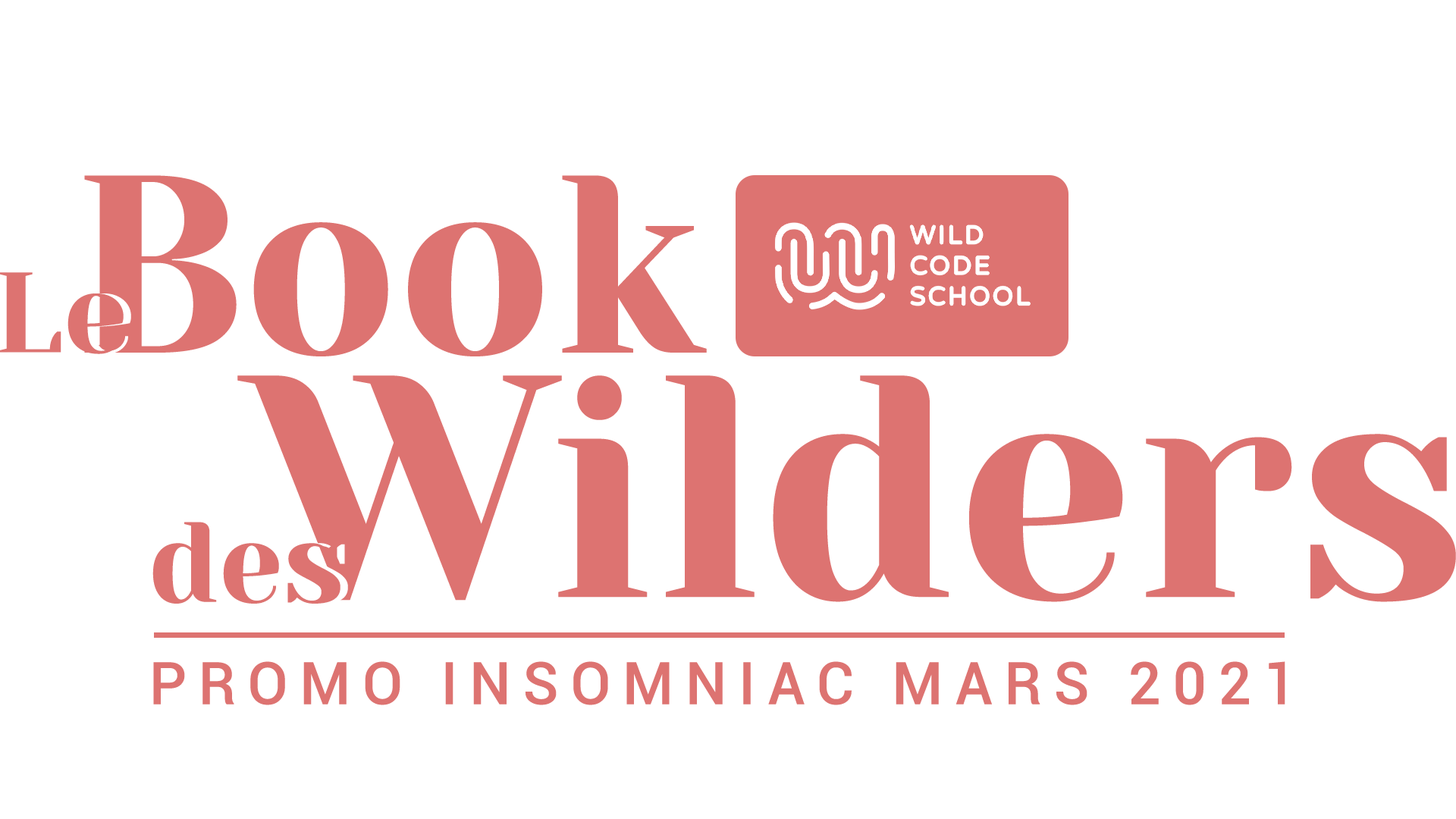
<style>
.page{position:relative;width:1456px;height:819px;background:#ffffff}
.page>*{position:absolute;margin:0}
.t1{font:252.8px "YesevaOne-Regular";color:#dd7371}
.t2{font:113.7px "YesevaOne-Regular";color:#dd7371}
.t3{font:316px "YesevaOne-Regular";color:#dd7371}
.t4{font:58.8px "Roboto-Medium";letter-spacing:0.2em;color:#dd7371;text-transform:uppercase}
</style>
<div class="page">
<p class="t1" style="left:84px;top:175px;width:623px;height:181px">Book</p>
<p class="t2" style="left:0px;top:272px;width:124px;height:82px">Le</p>
<p class="t3" style="left:237px;top:375px;width:1219px;height:227px">Wilders</p>
<p class="t2" style="left:152px;top:522px;width:188px;height:82px">des</p>
<p class="t4" style="left:153px;top:661px;width:1132px;height:44px">promo insomniac mars 2021</p>
</div>
